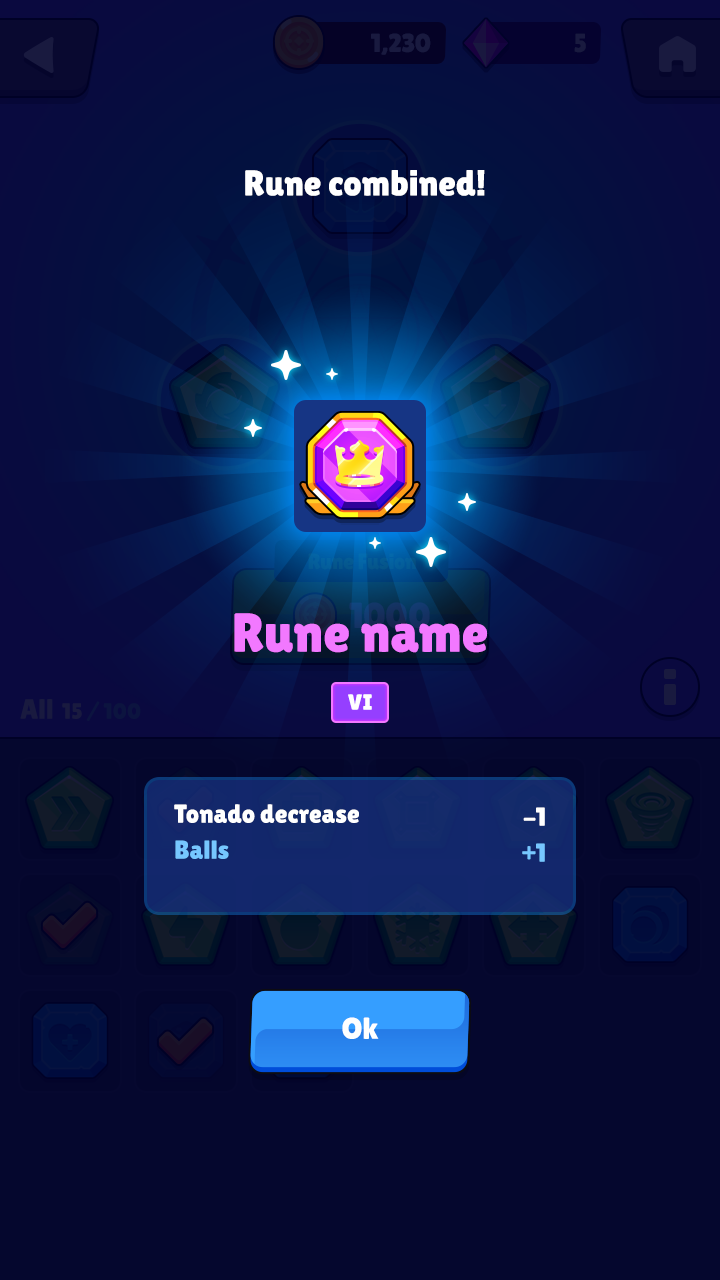
<style>
.page{position:relative;width:720px;height:1280px;background:#05072e}
.page>*{position:absolute;margin:0}
.t1{font:36px "LilitaOne";color:#ffffff}
.t2{font:55px "LilitaOne";color:#f278ff}
.t3{font:22px "LilitaOne";color:#ffffff}
.t4{font:26px/36px "LilitaOne";color:#ffffff}
.t5{font:26px/36px "LilitaOne";color:#76c7ff}
.t6{font:30px "LilitaOne";color:#ffffff}
</style>
<div class="page">
<p class="t1" style="left:245px;top:170px;width:240px;height:26px">Rune combined!</p>
<p class="t2" style="left:234px;top:613px;width:254px;height:40px">Rune name</p>
<p class="t3" style="left:348px;top:694px;width:24px;height:16px">VI</p>
<p class="t4" style="left:174px;top:804px;width:185px;height:55px">Tonado decrease <br><span class="t5">Balls</span></p>
<p class="t4" style="left:522px;top:807px;width:23px;height:55px;text-align:right">-1<br><span class="t5">+1</span></p>
<p class="t6" style="left:342px;top:1017px;width:37px;height:22px">Ok</p>
</div>
